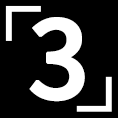
<style>
.page{position:relative;width:118px;height:118px;background:#000000}
.page>*{position:absolute;margin:0}
.t1{font:106.2px "SourceHanSansCN-Medium";color:#ffffff;font-weight:bold}
</style>
<div class="page">
<p class="t1" style="left:29px;top:17px;width:56px;height:85px">3</p>
</div>
